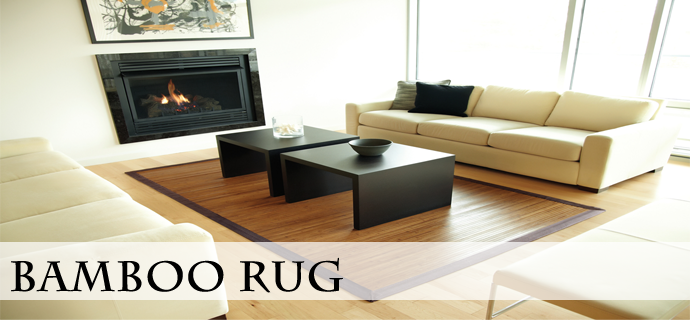
<style>
.page{position:relative;width:690px;height:320px}
.page>*{position:absolute;margin:0}
.t1{font:41.7px "CharlemagneStd-Bold";color:#000000;font-weight:bold}
.t2{font:12.5px "CharlemagneStd-Bold";color:#000000;font-weight:bold}
</style>
<div class="page">
<p class="t1" style="left:11px;top:257px;width:332px;height:36px"><span class="t2">                                                 </span>Bamboo Rug</p>
</div>
